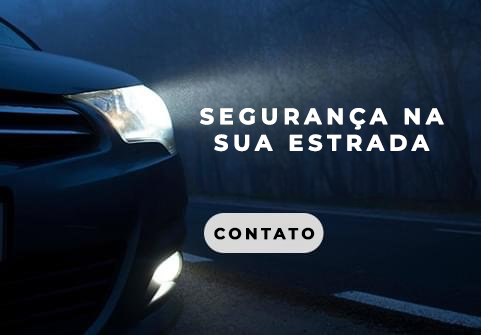
<style>
.page{position:relative;width:481px;height:335px}
.page>*{position:absolute;margin:0}
.t1{font:22px "Montserrat-Bold";letter-spacing:0.2em;color:#ffffff;font-weight:bold}
.t2{font:15.5px "Montserrat-Bold";letter-spacing:0.2em;color:#000000;font-weight:bold}
</style>
<div class="page">
<p class="t1" style="left:200px;top:108px;width:244px;height:44px;text-align:center">SEGURANÇA NA<br>SUA ESTRADA</p>
<p class="t2" style="left:214px;top:227px;width:101px;height:13px">CONTATO</p>
</div>
